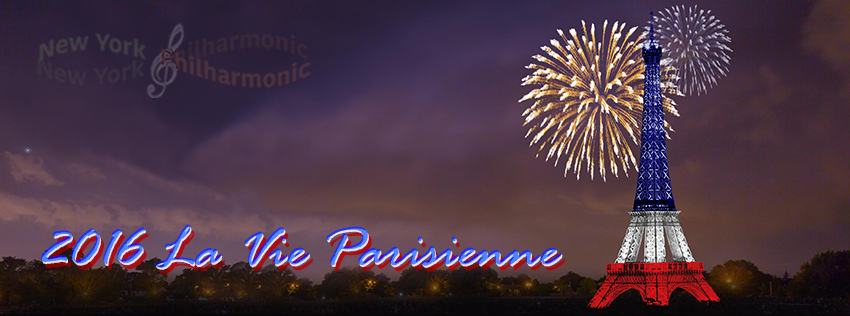
<style>
.page{position:relative;width:850px;height:316px}
.page>*{position:absolute;margin:0}
.t1{font:60px "RageItalic"}
</style>
<div class="page">
<p class="t1" style="left:41px;top:224px;width:521px;height:44px">2016 La Vie Parisienne</p>
<p class="t1" style="left:42px;top:226px;width:521px;height:44px">2016 La Vie Parisienne</p>
<p class="t1" style="left:45px;top:230px;width:521px;height:44px">2016 La Vie Parisienne</p>
</div>
